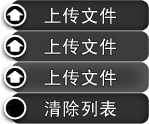
<style>
.page{position:relative;width:149px;height:124px}
.page>*{position:absolute;margin:0}
.t1{font:18px "SimHei";letter-spacing:0.025em;color:#ffffff;text-transform:uppercase}
</style>
<div class="page">
<p class="t1" style="left:44px;top:7px;width:72px;height:17px">上传文件</p>
<p class="t1" style="left:44px;top:38px;width:72px;height:17px">上传文件</p>
<p class="t1" style="left:44px;top:69px;width:72px;height:17px">上传文件</p>
<p class="t1" style="left:44px;top:100px;width:72px;height:17px">清除列表</p>
</div>
